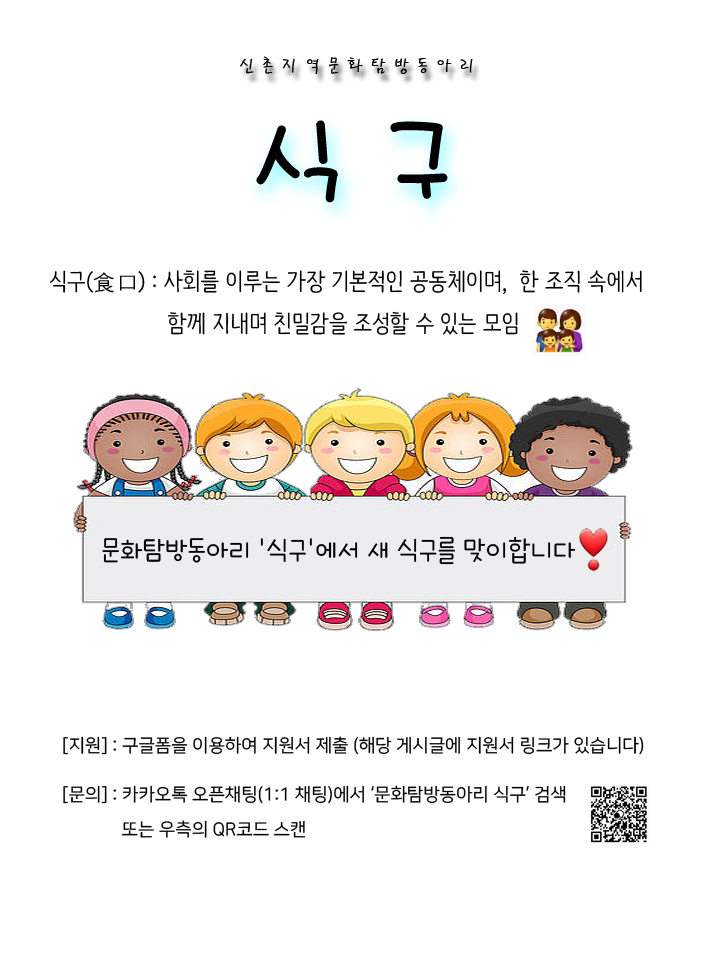
<style>
.page{position:relative;width:720px;height:960px;background:#ffffff}
.page>*{position:absolute;margin:0}
.t1{font:18px "PyunjiR-HM";color:#000000}
.t2{font:110px "Pix_HUHome152";color:#000000}
.t3{font:24px "Pix_NanumBarunpen";color:#000000}
.t4{font:24px "Fixedsys";color:#000000}
.t5{font:28px "icTTHayanbunpilL";color:#000000}
.t6{font:18px "NanumSquareR";color:#000000}
</style>
<div class="page">
<p class="t1" style="left:240px;top:56px;width:233px;height:18px">신 촌 지 역 문 화 탐 방 동 아 리</p>
<p class="t2" style="left:256px;top:120px;width:192px;height:83px">식 구</p>
<p class="t3" style="left:50px;top:270px;width:592px;height:65px">식구(食口) : 사회를 이루는 가장 기본적인 공동체이며,  한 조직 속에서 <br>                   함께 지내며 친밀감을 조성할 수 있는 모임</p>
<p class="t4" style="left:93px;top:272px;width:42px;height:21px">食口</p>
<p class="t5" style="left:102px;top:536px;width:474px;height:29px">문화탐방동아리 '식구'에서 새 식구를 맞이합니다</p>
<p class="t6" style="left:63px;top:736px;width:581px;height:19px">[지원] : 구글폼을 이용하여 지원서 제출 (해당 게시글에 지원서 링크가 있습니다)</p>
<p class="t6" style="left:63px;top:785px;width:503px;height:19px">[문의] : 카카오톡 오픈채팅(1:1 채팅)에서 ‘문화탐방동아리 식구’ 검색</p>
<p class="t6" style="left:122px;top:820px;width:184px;height:18px">또는 우측의 QR코드 스캔</p>
</div>
